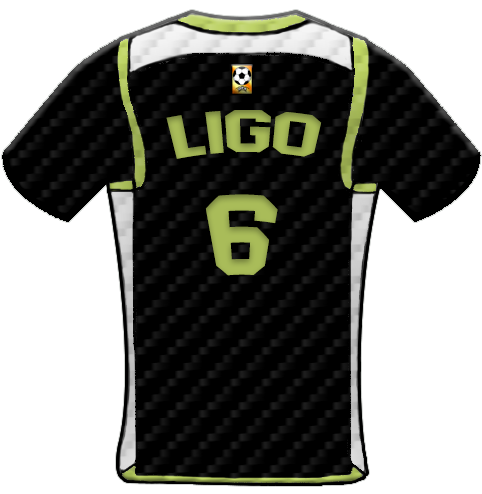
<style>
.page{position:relative;width:482px;height:494px;background:#ffffff}
.page>*{position:absolute;margin:0}
.t1{font:59.4px "AdidasHalfBlock2016";color:#a9bc59;scale:1.13 1}
.t2{font:113.8px "AdidasHalfBlock2016";color:#a9bc59}
</style>
<div class="page">
<p class="t1" style="left:166px;top:110px;width:156px;height:49px">Ligo</p>
<p class="t2" style="left:205px;top:194px;width:73px;height:82px">6</p>
</div>
